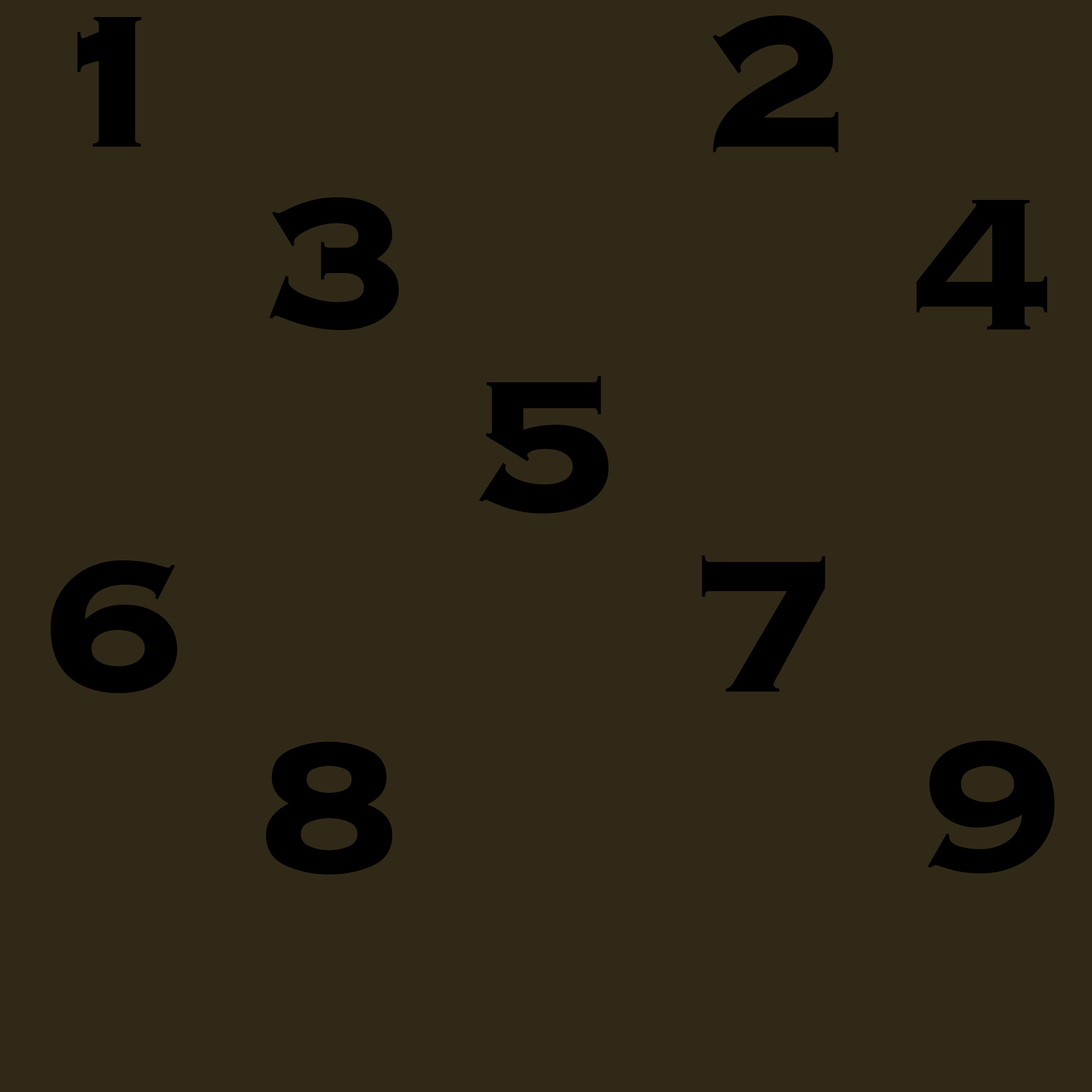
<style>
.page{position:relative;width:1092px;height:1092px;background:#312917}
.page>*{position:absolute;margin:0}
.t1{font:244.1px "CopperplateBlackCondensedSSiBlackCondensed";color:#000000}
</style>
<div class="page">
<p class="t1" style="left:77px;top:17px;width:65px;height:130px">1</p>
<p class="t1" style="left:712px;top:15px;width:127px;height:137px">2</p>
<p class="t1" style="left:269px;top:197px;width:130px;height:133px">3</p>
<p class="t1" style="left:916px;top:200px;width:131px;height:130px">4</p>
<p class="t1" style="left:479px;top:375px;width:130px;height:138px">5</p>
<p class="t1" style="left:702px;top:555px;width:123px;height:137px">7</p>
<p class="t1" style="left:51px;top:560px;width:127px;height:133px">6</p>
<p class="t1" style="left:266px;top:742px;width:126px;height:132px">8</p>
<p class="t1" style="left:928px;top:741px;width:127px;height:132px">9</p>
</div>
